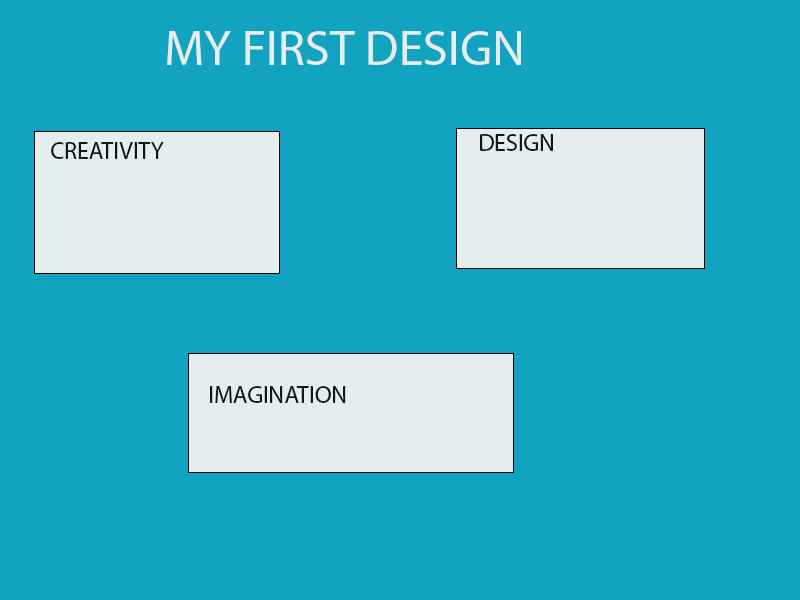
<style>
.page{position:relative;width:800px;height:600px;background:#11a3c0}
.page>*{position:absolute;margin:0}
.t1{font:50px "MyriadPro-Regular";color:#e6edee}
.t2{font:24px "MyriadPro-Regular";color:#081a1e}
</style>
<div class="page">
<p class="t1" style="left:167px;top:31px;width:354px;height:34px">MY FIRST DESIGN</p>
<p class="t2" style="left:480px;top:134px;width:73px;height:17px">DESIGN</p>
<p class="t2" style="left:51px;top:142px;width:113px;height:17px">CREATIVITY</p>
<p class="t2" style="left:210px;top:386px;width:136px;height:17px">IMAGINATION</p>
</div>
